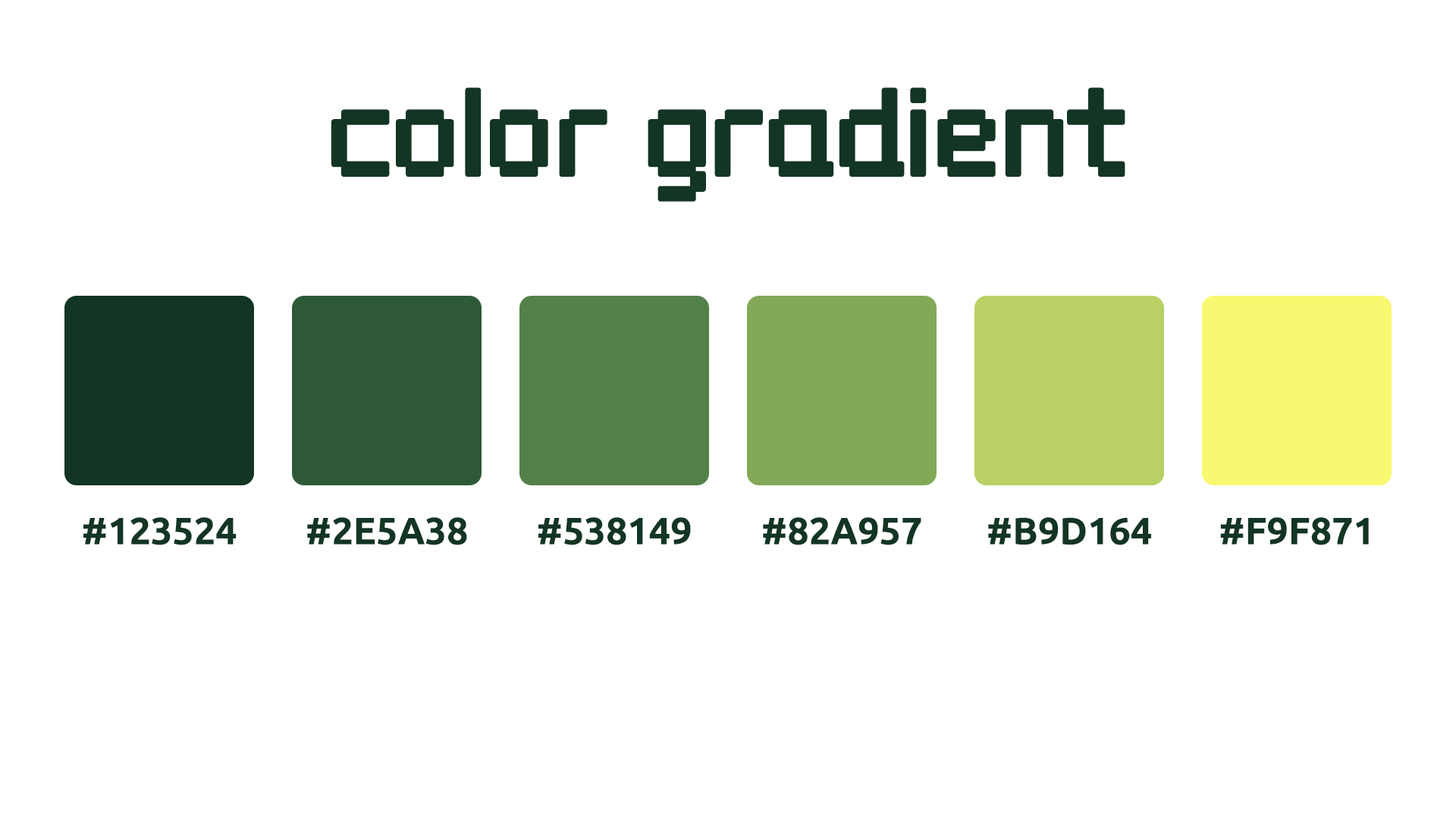
<style>
.page{position:relative;width:1456px;height:819px;background:#ffffff}
.page>*{position:absolute;margin:0}
.t1{font:113.7px "Wellbutrin";color:#123524}
.t2{font:37.9px "Ubuntu-Bold";color:#123524}
</style>
<div class="page">
<p class="t1" style="left:331px;top:87px;width:794px;height:115px">color gradient</p>
<p class="t2" style="left:83px;top:517px;width:154px;height:28px">#123524</p>
<p class="t2" style="left:307px;top:517px;width:160px;height:28px">#2E5A38</p>
<p class="t2" style="left:538px;top:517px;width:153px;height:28px">#538149</p>
<p class="t2" style="left:763px;top:517px;width:158px;height:28px">#82A957</p>
<p class="t2" style="left:988px;top:517px;width:163px;height:28px">#B9D164</p>
<p class="t2" style="left:1220px;top:517px;width:149px;height:28px">#F9F871</p>
</div>
